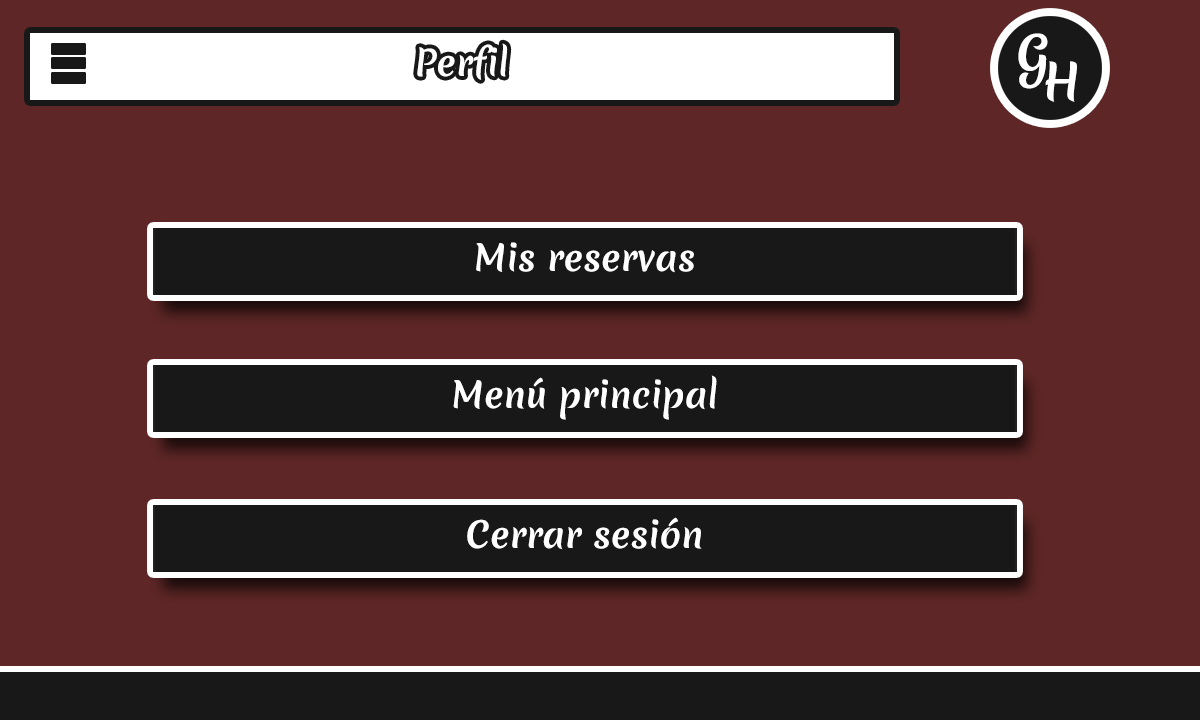
<style>
.page{position:relative;width:1200px;height:720px;background:#5e2626}
.page>*{position:absolute;margin:0}
.t1{font:48.4px "MeriendaOne-Regular";color:#ffffff}
.t2{font:35.1px "MeriendaOne-Regular";color:#ffffff}
</style>
<div class="page">
<p class="t1" style="left:1018px;top:33px;width:30px;height:56px">G</p>
<p class="t2" style="left:417px;top:43px;width:91px;height:37px">Perfil</p>
<p class="t1" style="left:1045px;top:61px;width:32px;height:41px">H</p>
<p class="t2" style="left:476px;top:242px;width:218px;height:31px">Mis reservas</p>
<p class="t2" style="left:453px;top:375px;width:264px;height:45px">Menú principal</p>
<p class="t2" style="left:467px;top:517px;width:235px;height:33px">Cerrar sesión</p>
</div>
